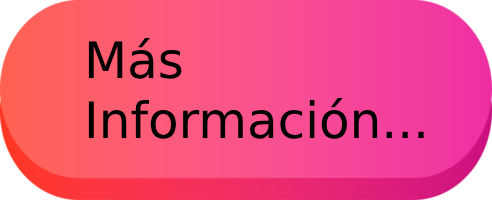
<style>
.page{position:relative;width:492px;height:200px}
.page>*{position:absolute;margin:0}
.t1{font:50px "DejaVuSans";color:#000000}
</style>
<div class="page">
<p class="t1" style="left:88px;top:38px;width:336px;height:101px">Más <br>Información...</p>
</div>
